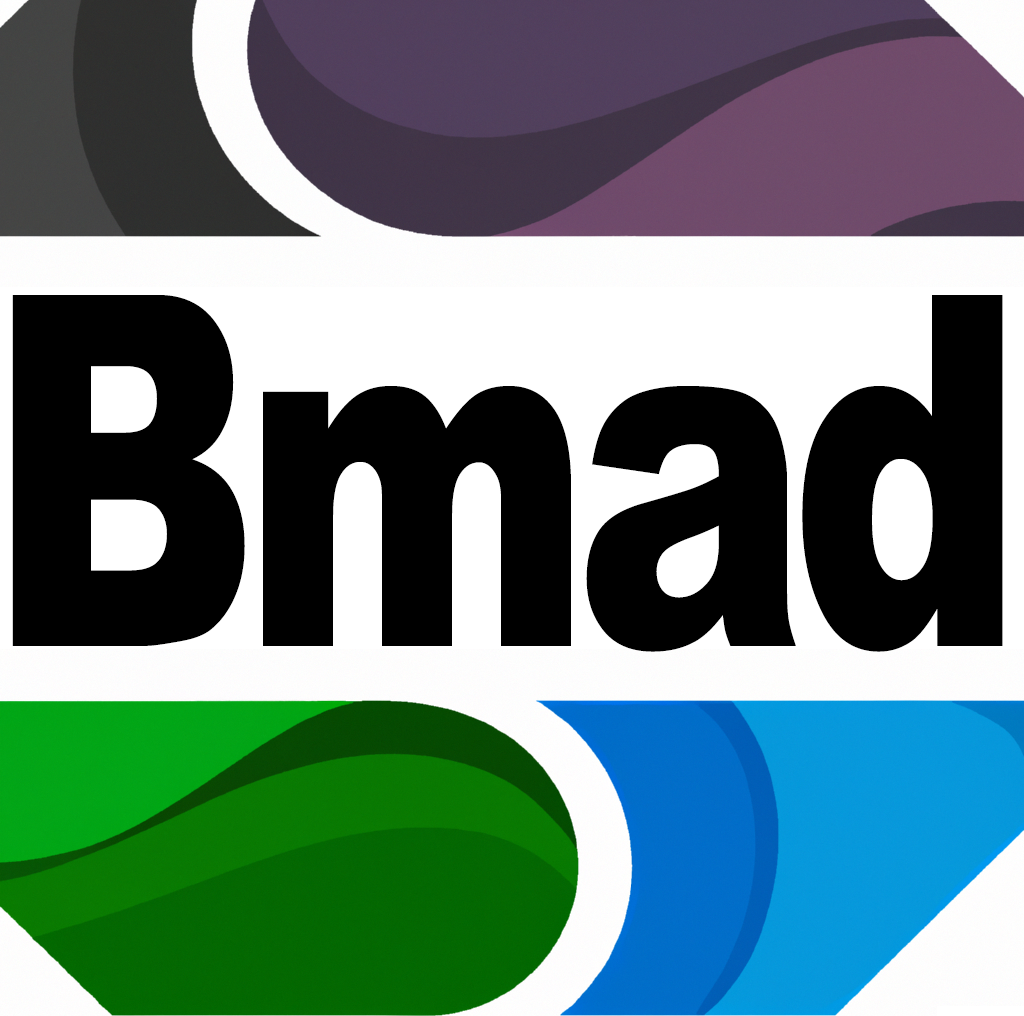
<style>
.page{position:relative;width:1024px;height:1016px;background:#000000}
.page>*{position:absolute;margin:0}
.t1{font:490px "Arial-Black";letter-spacing:-0.05em;color:#000000;scale:0.71 1}
</style>
<div class="page">
<p class="t1" style="left:12px;top:295px;width:991px;height:357px">Bmad</p>
</div>
